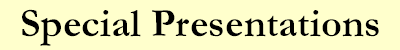
<style>
.page{position:relative;width:400px;height:50px;background:#ffffcc}
.page>*{position:absolute;margin:0}
.t1{font:40px "Garamond-Bold";color:#000000}
</style>
<div class="page">
<p class="t1" style="left:22px;top:9px;width:357px;height:37px">Special Presentations</p>
</div>
